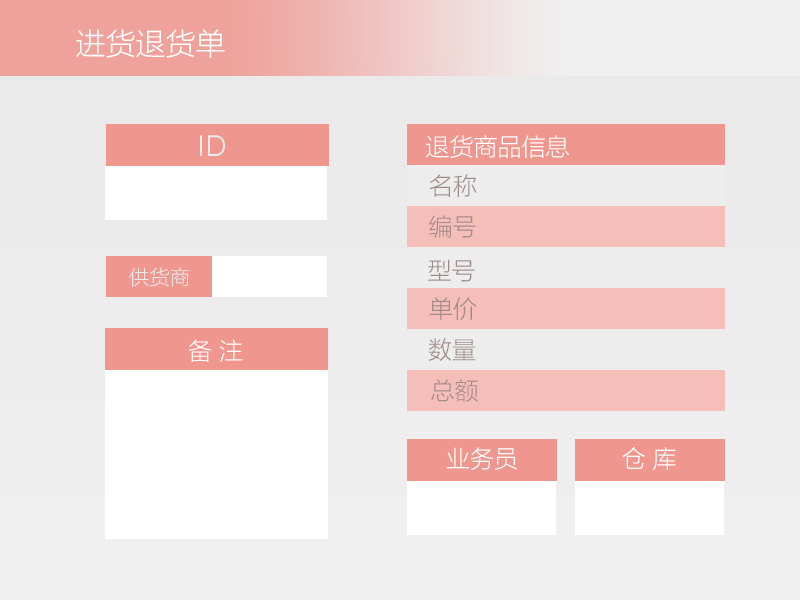
<style>
.page{position:relative;width:800px;height:600px}
.page>*{position:absolute;margin:0}
.t1{font:30px "MicrosoftYaHeiLight";color:#ffffff}
.t2{font:30px "SofiaProLight";color:#e9e9e9}
.t3{font:24px "MicrosoftYaHeiLight";color:#ffffff}
.t4{font:24px "MicrosoftYaHeiLight";color:#a08989}
.t5{font:20px "MicrosoftYaHeiLight";color:#e9e9e9}
</style>
<div class="page">
<p class="t1" style="left:76px;top:29px;width:149px;height:29px">进货退货单</p>
<p class="t2" style="left:200px;top:135px;width:25px;height:21px">ID</p>
<p class="t3" style="left:426px;top:135px;width:143px;height:23px">退货商品信息</p>
<p class="t4" style="left:429px;top:174px;width:48px;height:23px">名称</p>
<p class="t4" style="left:429px;top:215px;width:47px;height:23px">编号</p>
<p class="t5" style="left:129px;top:267px;width:61px;height:20px">供货商</p>
<p class="t4" style="left:428px;top:259px;width:47px;height:23px">型号</p>
<p class="t4" style="left:429px;top:297px;width:48px;height:23px">单价</p>
<p class="t3" style="left:188px;top:339px;width:55px;height:23px">备 注</p>
<p class="t4" style="left:428px;top:338px;width:48px;height:23px">数量</p>
<p class="t4" style="left:431px;top:379px;width:47px;height:23px">总额</p>
<p class="t3" style="left:446px;top:447px;width:71px;height:23px">业务员</p>
<p class="t3" style="left:622px;top:447px;width:54px;height:23px">仓 库</p>
</div>
